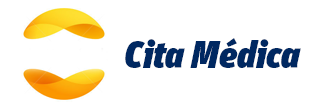
<style>
.page{position:relative;width:320px;height:112px;background:#ffffff}
.page>*{position:absolute;margin:0}
.t1{font:37.7px "UnitPro-UltraIta";color:#002861}
</style>
<div class="page">
<p class="t1" style="left:125px;top:38px;width:176px;height:30px">Cita Médica</p>
</div>
